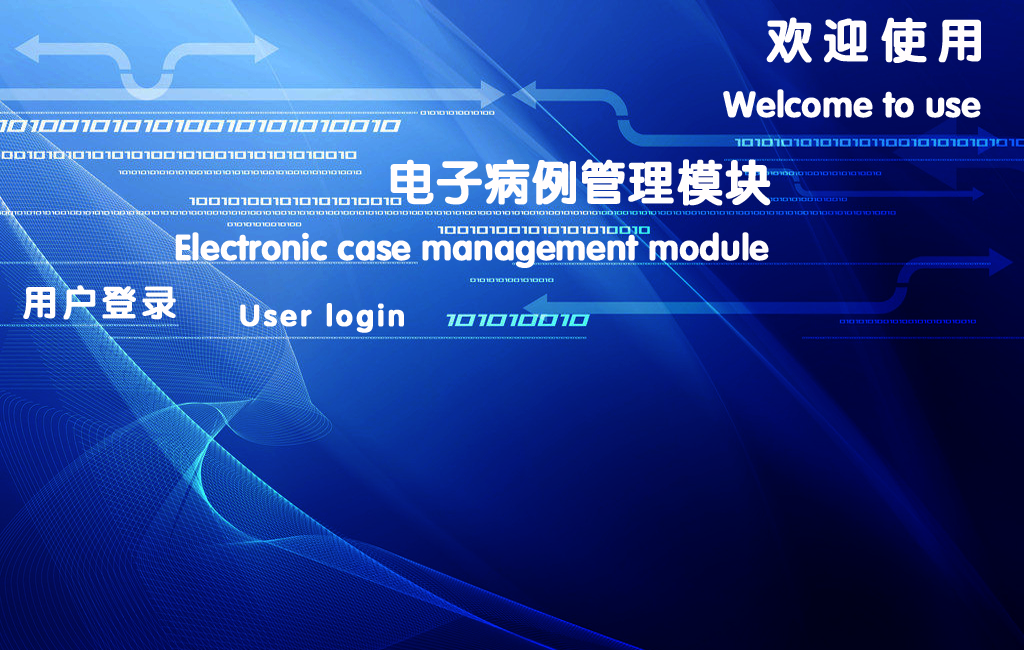
<style>
.page{position:relative;width:1024px;height:650px}
.page>*{position:absolute;margin:0}
.t1{font:48px "FZY4JW--GB1-0";letter-spacing:0.2em;color:#fffdfd;font-weight:bold}
.t2{font:36px "FZY4JW--GB1-0";color:#fffdfd;font-weight:bold}
.t3{font:48px "FZY4JW--GB1-0";color:#fffdfd;font-weight:bold}
.t4{font:36px "FZY4JW--GB1-0";letter-spacing:0.1em;color:#fffdfd;font-weight:bold}
.t5{font:30px "FZY4JW--GB1-0";letter-spacing:0.1em;color:#fffdfd;font-weight:bold}
</style>
<div class="page">
<p class="t1" style="left:766px;top:17px;width:215px;height:46px">欢迎使用</p>
<p class="t2" style="left:723px;top:89px;width:258px;height:29px">Welcome to use</p>
<p class="t3" style="left:390px;top:159px;width:381px;height:47px">电子病例管理模块</p>
<p class="t2" style="left:175px;top:232px;width:594px;height:36px">Electronic case management module</p>
<p class="t4" style="left:23px;top:285px;width:153px;height:35px">用户登录</p>
<p class="t5" style="left:240px;top:303px;width:164px;height:30px">User login</p>
</div>
